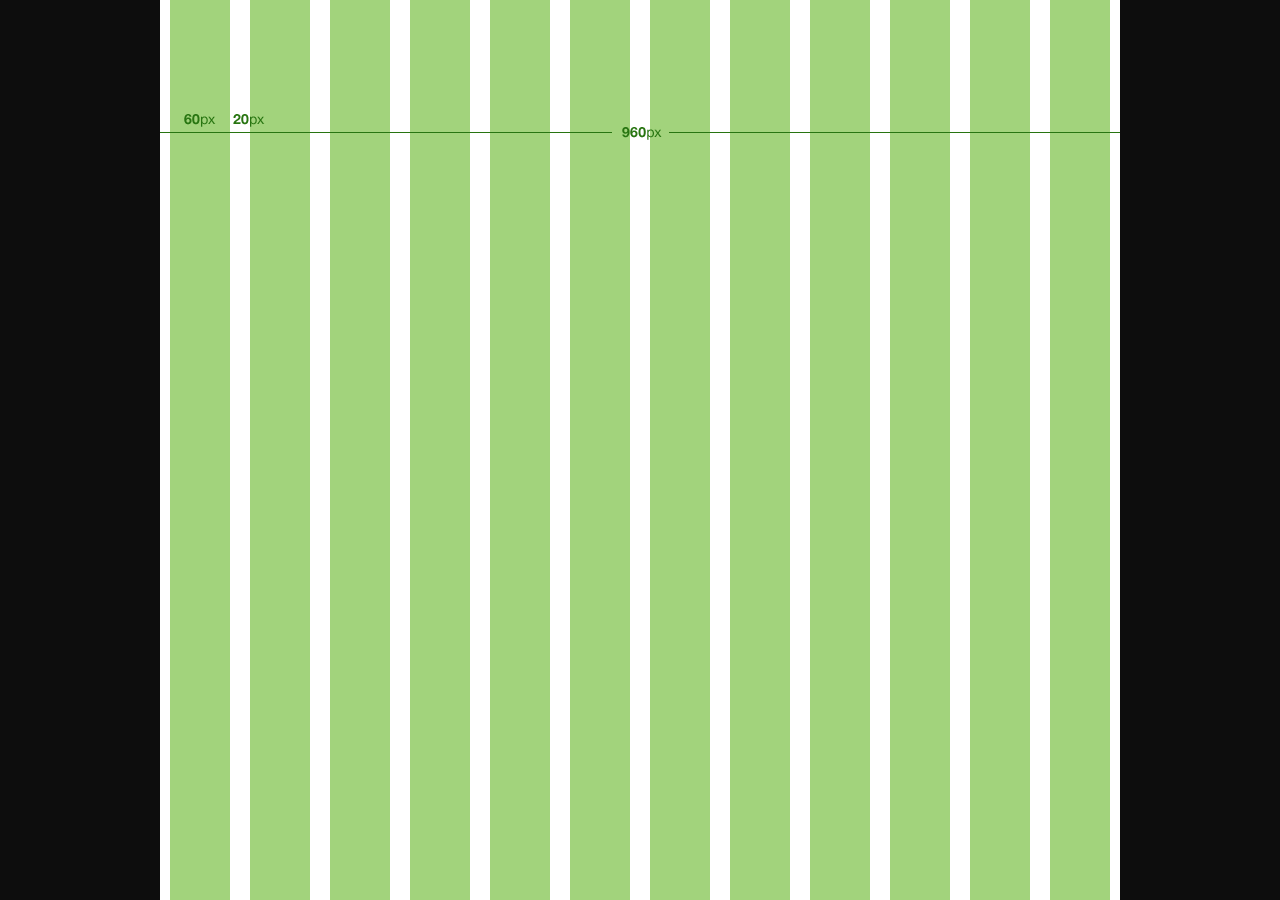
<style>
.page{position:relative;width:1280px;height:900px;background:#a2d37c}
.page>*{position:absolute;margin:0}
.t1{font:14px "HelveticaNeue-Bold";color:#287511}
.t2{font:14px "HelveticaNeue";color:#287511}
</style>
<div class="page">
<p class="t1" style="left:184px;top:114px;width:32px;height:13px">60<span class="t2">px</span></p>
<p class="t1" style="left:233px;top:114px;width:32px;height:13px">20<span class="t2">px</span></p>
<p class="t1" style="left:622px;top:127px;width:40px;height:13px">960<span class="t2">px</span></p>
</div>
